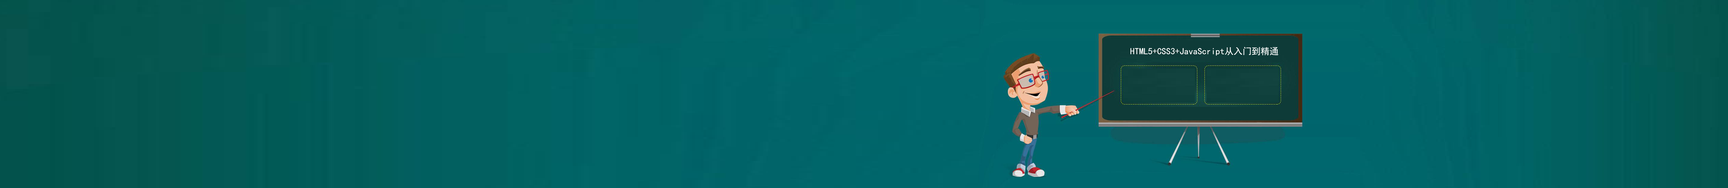
<style>
.page{position:relative;width:1728px;height:188px}
.page>*{position:absolute;margin:0}
.t1{font:9px "SimHei";color:#ffffff}
</style>
<div class="page">
<p class="t1" style="left:1130px;top:47px;width:148px;height:9px">HTML5+CSS3+JavaScript从入门到精通</p>
</div>
